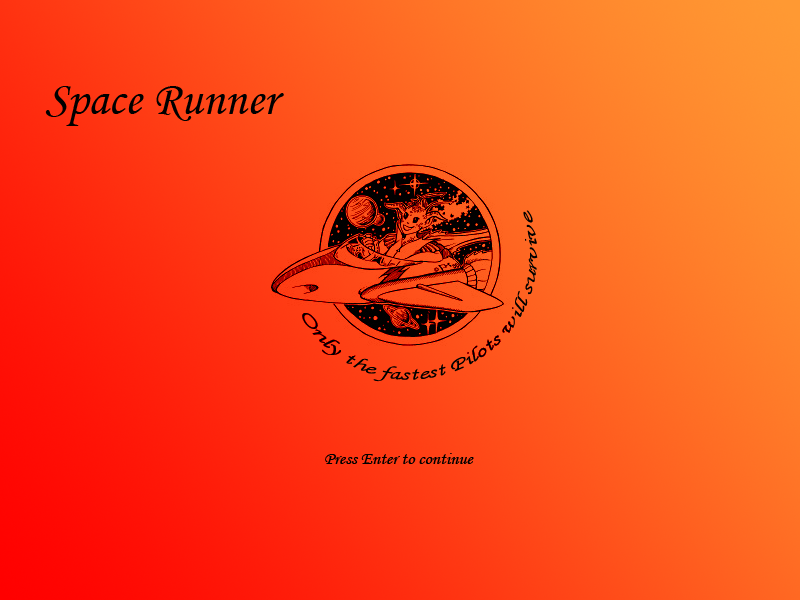
<style>
.page{position:relative;width:800px;height:600px}
.page>*{position:absolute;margin:0}
.t1{font:48px "MonotypeCorsiva";color:#000000}
.t2{font:18px "MonotypeCorsiva";color:#000000}
</style>
<div class="page">
<p class="t1" style="left:45px;top:86px;width:239px;height:40px">Space Runner</p>
<p class="t2" style="left:325px;top:453px;width:149px;height:11px">Press Enter to continue</p>
</div>
